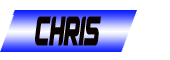
<style>
.page{position:relative;width:170px;height:60px;background:#ffffff}
.page>*{position:absolute;margin:0}
.t1{font:75px "Spantaran";color:#0a0101;font-weight:bold;scale:0.5 1}
</style>
<div class="page">
<p class="t1" style="left:35px;top:16px;width:66px;height:30px">CHRIS</p>
</div>
